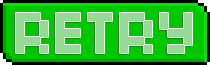
<style>
.page{position:relative;width:210px;height:65px;background:#00c700}
.page>*{position:absolute;margin:0}
.t1{font:64px "04b03";color:#95db95}
</style>
<div class="page">
<p class="t1" style="left:16px;top:13px;width:176px;height:40px">RETRY</p>
</div>
